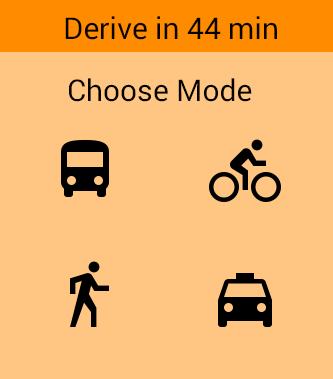
<style>
.page{position:relative;width:333px;height:379px;background:#ffc683}
.page>*{position:absolute;margin:0}
.t1{font:30px "Roboto-Black";color:#050300}
</style>
<div class="page">
<p class="t1" style="left:65px;top:16px;width:212px;height:24px">Derive in 44 min</p>
<p class="t1" style="left:69px;top:78px;width:183px;height:24px">Choose Mode</p>
</div>
